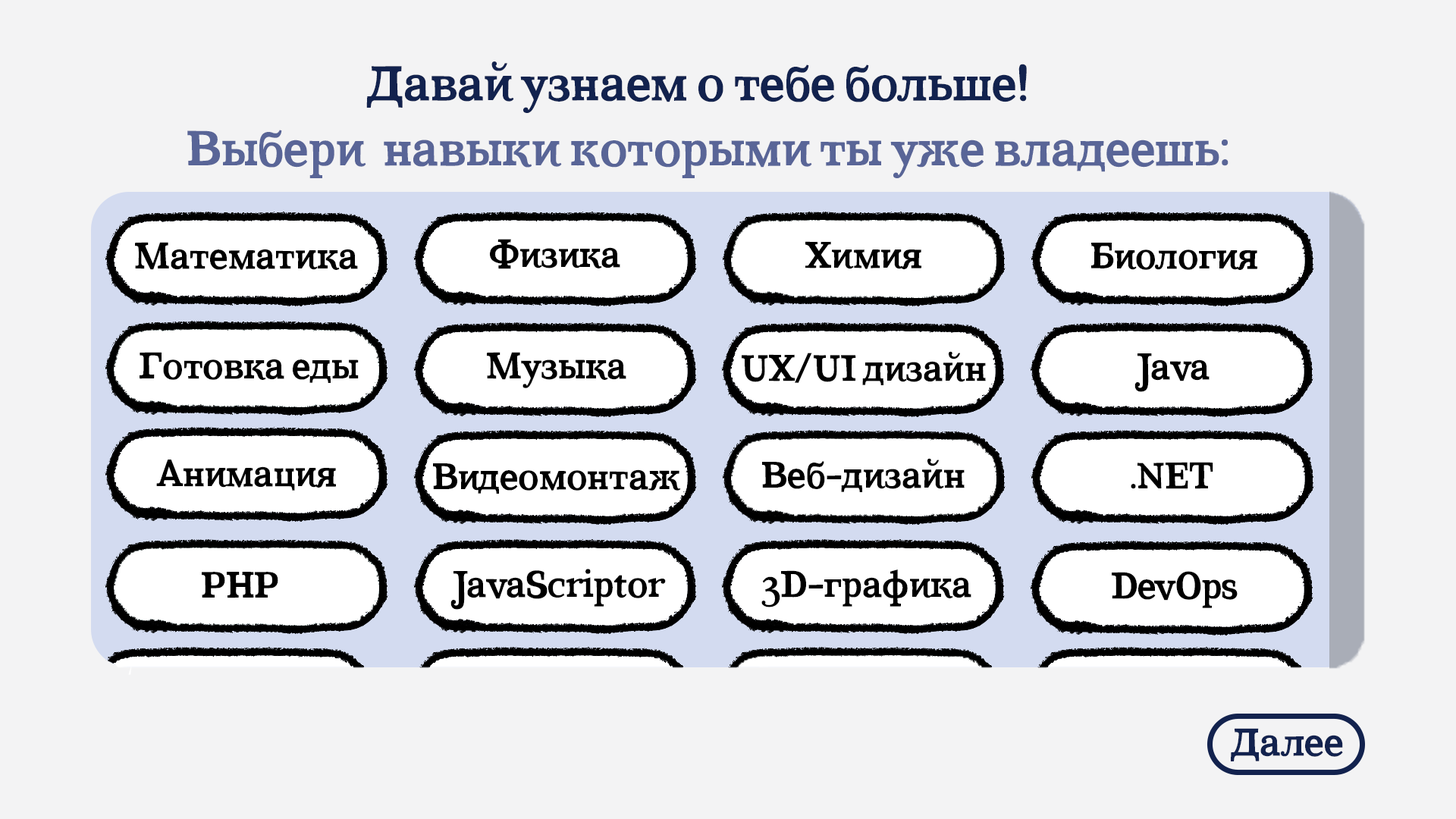
<style>
.page{position:relative;width:1456px;height:819px;background:#f3f3f4}
.page>*{position:absolute;margin:0}
.t1{font:48.5px "CoatsBold-Bold";color:#12224e}
.t2{font:48.5px "CoatsBold-Bold";color:#596597}
.t3{font:36.4px "CoatsBold-Bold";color:#000000}
.t4{font:38.3px "CoatsBold-Bold";color:#12224e}
</style>
<div class="page">
<p class="t1" style="left:366px;top:61px;width:661px;height:52px">Давай узнаем о тебе больше!</p>
<p class="t2" style="left:187px;top:130px;width:1041px;height:48px">Выбери  навыки которыми ты уже владеешь:</p>
<p class="t3" style="left:135px;top:242px;width:223px;height:28px">Математика</p>
<p class="t3" style="left:490px;top:239px;width:130px;height:30px">Физика</p>
<p class="t3" style="left:805px;top:241px;width:116px;height:28px">Химия</p>
<p class="t3" style="left:1091px;top:243px;width:166px;height:27px">Биология</p>
<p class="t3" style="left:140px;top:352px;width:219px;height:31px">Готовка еды</p>
<p class="t3" style="left:487px;top:352px;width:139px;height:36px">Музыка</p>
<p class="t3" style="left:742px;top:351px;width:244px;height:34px">UX/UI дизайн</p>
<p class="t3" style="left:1134px;top:353px;width:76px;height:39px">Java</p>
<p class="t3" style="left:156px;top:460px;width:180px;height:31px">Анимация</p>
<p class="t3" style="left:762px;top:458px;width:203px;height:34px">Веб-дизайн</p>
<p class="t3" style="left:1131px;top:462px;width:82px;height:27px">.NET</p>
<p class="t3" style="left:433px;top:463px;width:248px;height:31px">Видеомонтаж</p>
<p class="t3" style="left:450px;top:569px;width:216px;height:41px">JavaScriptor</p>
<p class="t3" style="left:761px;top:570px;width:210px;height:37px">3D-графика</p>
<p class="t3" style="left:202px;top:572px;width:76px;height:26px">PHP</p>
<p class="t3" style="left:1112px;top:571px;width:126px;height:37px">DevOps</p>
<p class="t4" style="left:1231px;top:728px;width:112px;height:33px">Дaлее</p>
</div>
